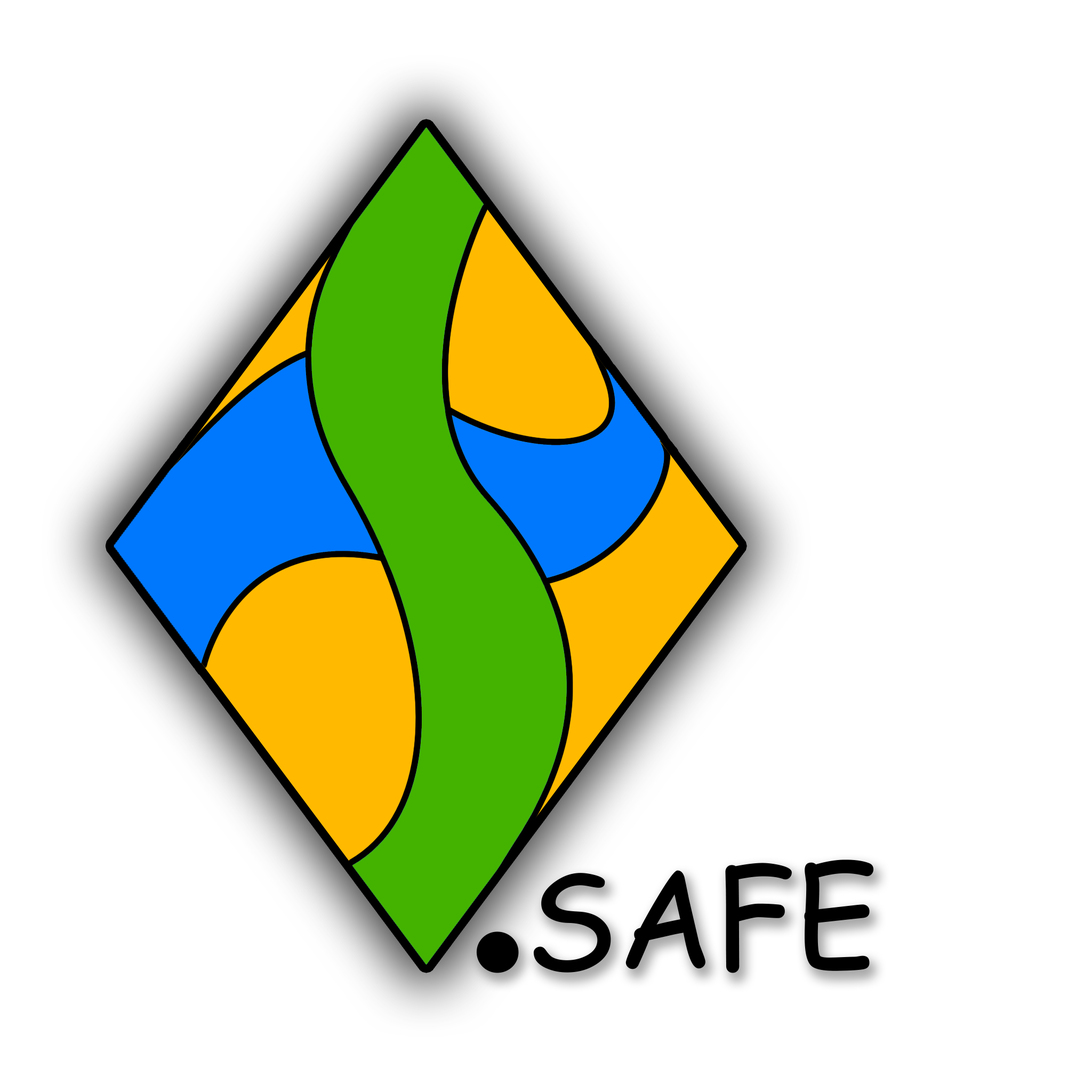
<style>
.page{position:relative;width:1092px;height:1092px;background:#ffffff}
.page>*{position:absolute;margin:0}
.t1{font:133.3px "ComicSansMS";color:#000000}
.t2{font:186.6px "HoboStd";color:#000000}
</style>
<div class="page">
<p class="t1" style="left:476px;top:860px;width:398px;height:113px;rotate:-1deg"><span class="t2">.</span>SAFE</p>
</div>
